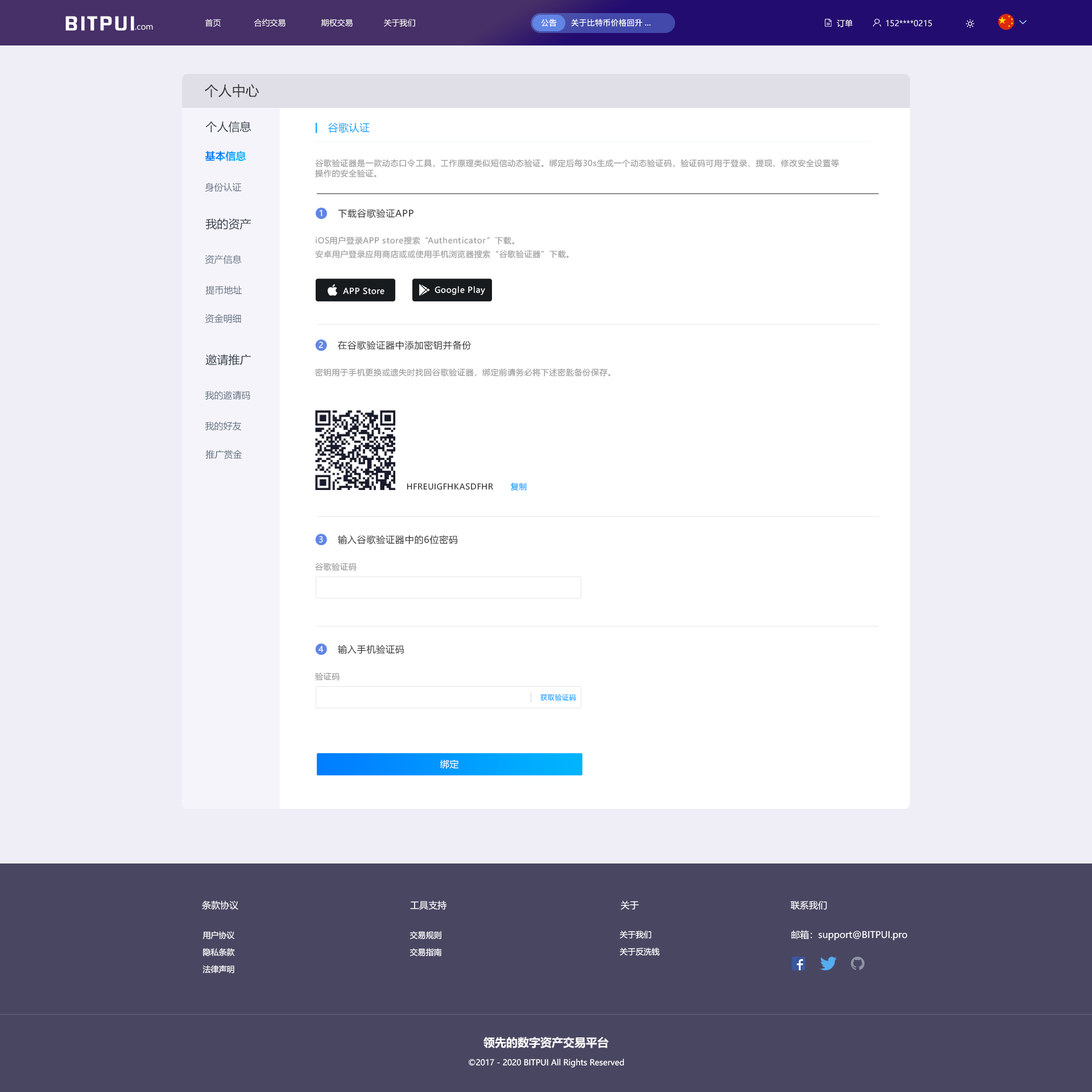
<style>
.page{position:relative;width:1092px;height:1092px;background:#ffffff}
.page>*{position:absolute;margin:0}
.t1{font:17.4px "FZHZGBJW--GB1-0";letter-spacing:0.1em;color:#ffffff;scale:1.14 1}
.t2{font:8px "MicrosoftYaHei";color:#ffffff}
.t3{font:8px "PingFang-SC-Bold";color:#ffffff}
.t4{font:13.6px "MicrosoftYaHei";color:#333333}
.t5{font:11.4px "MicrosoftYaHei";color:#303b47}
.t6{font:10.2px "MicrosoftYaHei";letter-spacing:0.03em;color:#009dfa}
.t7{font:10.2px "MicrosoftYaHei-Bold";color:#009dfa}
.t8{font:8px/10.2px "MicrosoftYaHei";letter-spacing:0.05em;color:#999999}
.t9{font:9.1px "MicrosoftYaHei";color:#637282}
.t10{font:8px "MicrosoftYaHei";letter-spacing:0.05em;color:#ffffff}
.t11{font:9.1px "MicrosoftYaHei";letter-spacing:0.05em;color:#333333}
.t12{font:8px/13.6px "MicrosoftYaHei";letter-spacing:0.05em;color:#999999}
.t13{font:8px "MicrosoftYaHei";letter-spacing:0.05em;color:#999999}
.t14{font:8px "MicrosoftYaHei";letter-spacing:0.05em;color:#333333}
.t15{font:8px "MicrosoftYaHei";letter-spacing:0.05em;color:#009dfa}
.t16{font:6.8px "MicrosoftYaHei";letter-spacing:0.05em;color:#009dfa}
.t17{font:9.1px "MicrosoftYaHei";letter-spacing:0.05em;color:#ffffff}
.t18{font:9.1px "MicrosoftYaHei";color:#ffffff}
.t19{font:8px/17.1px "MicrosoftYaHei";color:#ffffff}
.t20{font:11.4px "MicrosoftYaHei-Bold";color:#ffffff}
</style>
<div class="page">
<p class="t1" style="left:65px;top:16px;width:69px;height:15px">BITPUI</p>
<p class="t2" style="left:135px;top:25px;width:18px;height:5px">.com</p>
<p class="t2" style="left:205px;top:19px;width:210px;height:8px">首页              合约交易               期权交易             关于我们</p>
<p class="t3" style="left:541px;top:19px;width:16px;height:8px">公告</p>
<p class="t3" style="left:571px;top:19px;width:79px;height:8px">关于比特币价格回升...</p>
<p class="t2" style="left:836px;top:19px;width:16px;height:8px">订单</p>
<p class="t2" style="left:886px;top:20px;width:46px;height:7px">152****0215</p>
<p class="t4" style="left:205px;top:84px;width:54px;height:14px">个人中心</p>
<p class="t5" style="left:205px;top:121px;width:46px;height:11px">个人信息</p>
<p class="t6" style="left:328px;top:123px;width:42px;height:10px">谷歌认证</p>
<p class="t7" style="left:205px;top:151px;width:41px;height:10px">基本信息</p>
<p class="t8" style="left:315px;top:159px;width:524px;height:18px">谷歌验证器是一款动态口令工具，工作原理类似短信动态验证。绑定后每30s生成一个动态验证码，验证码可用于登录、提现、修改安全设置等<br>操作的安全验证。</p>
<p class="t9" style="left:205px;top:183px;width:37px;height:9px">身份认证</p>
<p class="t10" style="left:320px;top:210px;width:2px;height:7px">1</p>
<p class="t11" style="left:338px;top:209px;width:75px;height:9px">下载谷歌验证APP</p>
<p class="t5" style="left:205px;top:218px;width:46px;height:12px">我的资产</p>
<p class="t12" style="left:315px;top:237px;width:254px;height:21px">iOS用户登录APP store搜索“Authenticator”下载。<br>安卓用户登录应用商店或或使用手机浏览器搜索“谷歌验证器”下载。</p>
<p class="t9" style="left:205px;top:255px;width:37px;height:9px">资产信息</p>
<p class="t9" style="left:205px;top:285px;width:37px;height:10px">提币地址</p>
<p class="t10" style="left:343px;top:288px;width:41px;height:7px">APP Store</p>
<p class="t10" style="left:434px;top:286px;width:51px;height:9px">Google Play</p>
<p class="t9" style="left:205px;top:314px;width:36px;height:10px">资金明细</p>
<p class="t10" style="left:318px;top:342px;width:5px;height:7px">2</p>
<p class="t11" style="left:338px;top:341px;width:133px;height:9px">在谷歌验证器中添加密钥并备份</p>
<p class="t5" style="left:205px;top:354px;width:46px;height:12px">邀请推广</p>
<p class="t13" style="left:315px;top:368px;width:296px;height:9px">密钥用于手机更换或遗失时找回谷歌验证器，绑定前请务必将下述密匙备份保存。</p>
<p class="t9" style="left:205px;top:391px;width:45px;height:9px">我的邀请码</p>
<p class="t9" style="left:205px;top:421px;width:37px;height:10px">我的好友</p>
<p class="t9" style="left:205px;top:450px;width:37px;height:9px">推广赏金</p>
<p class="t14" style="left:407px;top:483px;width:86px;height:7px">HFREUIGFHKASDFHR</p>
<p class="t15" style="left:510px;top:483px;width:17px;height:8px">复制</p>
<p class="t10" style="left:319px;top:536px;width:4px;height:7px">3</p>
<p class="t11" style="left:338px;top:535px;width:120px;height:10px">输入谷歌验证器中的6位密码</p>
<p class="t13" style="left:315px;top:563px;width:42px;height:8px">谷歌验证码</p>
<p class="t10" style="left:318px;top:646px;width:6px;height:7px">4</p>
<p class="t11" style="left:338px;top:645px;width:66px;height:9px">输入手机验证码</p>
<p class="t13" style="left:315px;top:673px;width:24px;height:8px">验证码</p>
<p class="t16" style="left:540px;top:694px;width:36px;height:7px">获取验证码</p>
<p class="t17" style="left:440px;top:760px;width:19px;height:9px">绑定</p>
<p class="t18" style="left:202px;top:901px;width:36px;height:9px">条款协议</p>
<p class="t18" style="left:410px;top:901px;width:36px;height:9px">工具支持</p>
<p class="t18" style="left:620px;top:901px;width:19px;height:9px">关于</p>
<p class="t18" style="left:790px;top:901px;width:37px;height:9px">联系我们</p>
<p class="t19" style="left:202px;top:931px;width:33px;height:42px;text-align:center">用户协议<br>隐私条款<br>法律声明</p>
<p class="t19" style="left:409px;top:931px;width:33px;height:25px">交易规则<br>交易指南</p>
<p class="t19" style="left:619px;top:931px;width:41px;height:25px">关于我们<br>关于反洗钱</p>
<p class="t18" style="left:791px;top:930px;width:116px;height:11px">邮箱：support@BITPUI.pro</p>
<p class="t20" style="left:483px;top:1037px;width:125px;height:11px">领先的数字资产交易平台</p>
<p class="t2" style="left:469px;top:1059px;width:155px;height:9px">©2017 - 2020 BITPUI All Rights Reserved</p>
</div>
